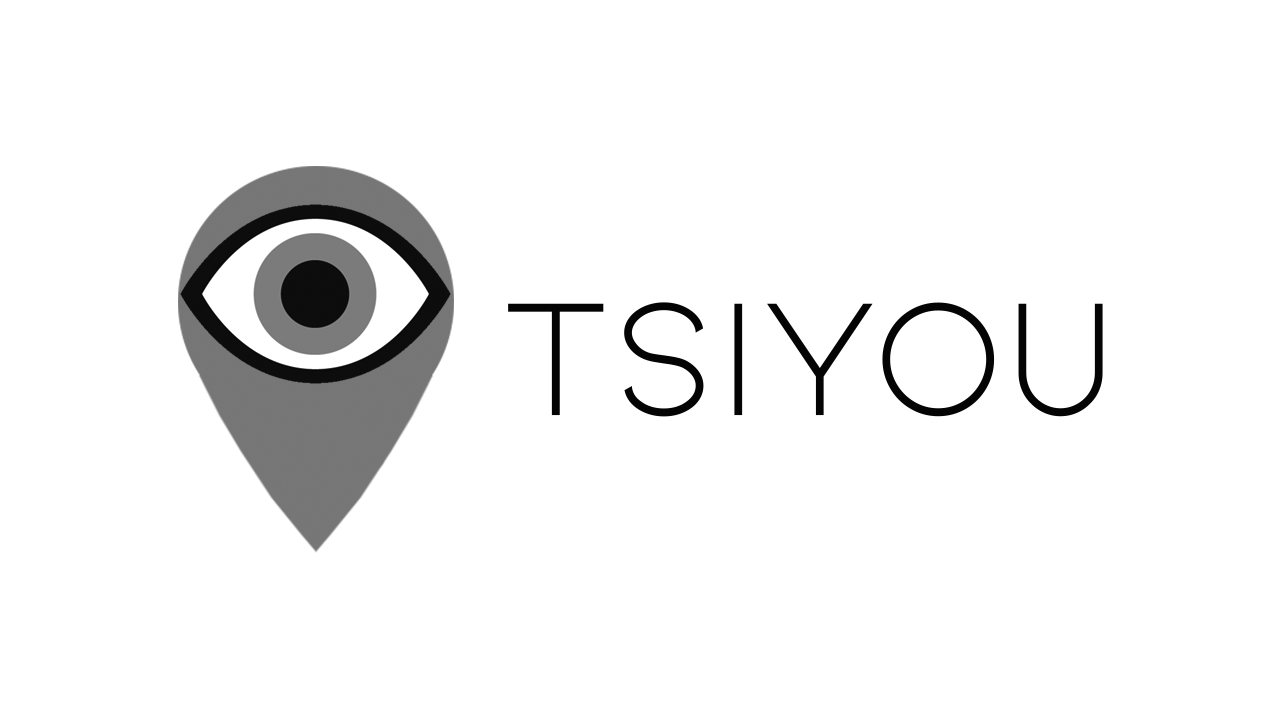
<style>
.page{position:relative;width:1280px;height:720px;background:#ffffff}
.page>*{position:absolute;margin:0}
.t1{font:171.1px "Kiona-Regular";color:#040404}
</style>
<div class="page">
<p class="t1" style="left:508px;top:302px;width:595px;height:115px">TsiYou</p>
</div>
